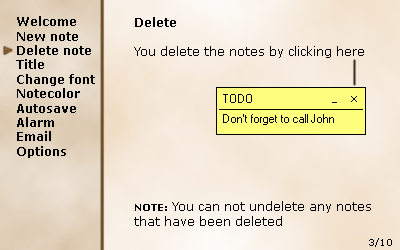
<style>
.page{position:relative;width:400px;height:250px}
.page>*{position:absolute;margin:0}
.t1{font:12px "Verdana-Bold";color:#010101}
.t2{font:12px "Verdana";color:#000000}
.t3{font:12px "Verdana-Bold";color:#000000}
.t4{font:10px "Verdana-Bold";color:#000000}
.t5{font:9px "Verdana";color:#000000}
</style>
<div class="page">
<p class="t1" style="left:16px;top:16px;width:79px;height:142px">Welcome<br>New note<br>Delete note<br>Title<br>Change font<br>Notecolor<br>Autosave<br>Alarm<br>Email<br>Options</p>
<p class="t2" style="left:134px;top:17px;width:230px;height:41px"><span class="t3">Delete<br><br></span>You delete the notes by clicking here</p>
<p class="t2" style="left:134px;top:201px;width:237px;height:25px"><span class="t4">NOTE:</span> You can not undelete any notes that have been deleted</p>
<p class="t5" style="left:369px;top:238px;width:23px;height:9px">3/10</p>
</div>
